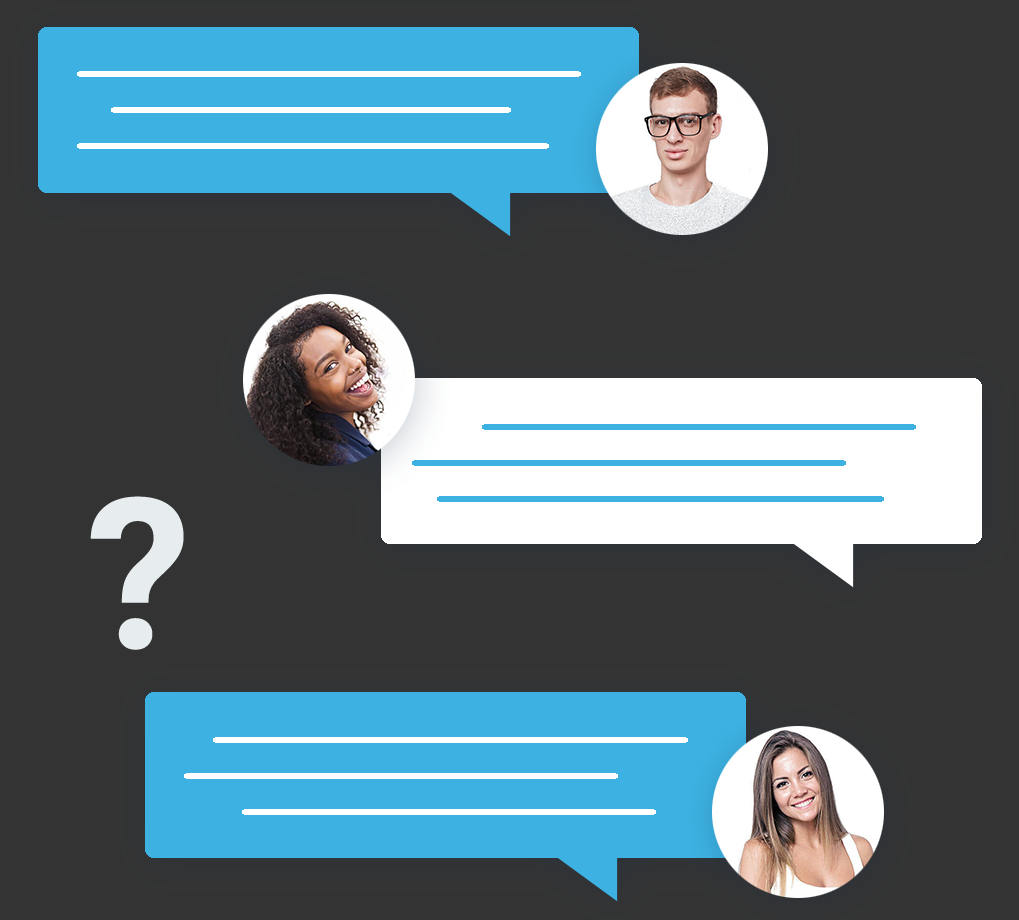
<style>
.page{position:relative;width:1019px;height:920px;background:#333333}
.page>*{position:absolute;margin:0}
.t1{font:210.4px "Roboto-Bold";letter-spacing:0.05em;color:#e7ecee}
</style>
<div class="page">
<p class="t1" style="left:90px;top:496px;width:94px;height:154px">?</p>
</div>
